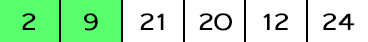
<style>
.page{position:relative;width:368px;height:42px;background:#ffffff}
.page>*{position:absolute;margin:0}
.t1{font:25.2px "Shruti";letter-spacing:-0.08em;color:#000000;text-transform:uppercase;scale:1.34 1}
</style>
<div class="page">
<p class="t1" style="left:22px;top:13px;width:14px;height:17px">2</p>
<p class="t1" style="left:22px;top:13px;width:14px;height:17px">2</p>
<p class="t1" style="left:22px;top:13px;width:14px;height:17px">2</p>
<p class="t1" style="left:84px;top:13px;width:14px;height:18px">9</p>
<p class="t1" style="left:140px;top:13px;width:24px;height:17px">21</p>
<p class="t1" style="left:140px;top:13px;width:24px;height:17px">21</p>
<p class="t1" style="left:140px;top:13px;width:24px;height:17px">21</p>
<p class="t1" style="left:140px;top:13px;width:24px;height:17px">21</p>
<p class="t1" style="left:140px;top:13px;width:24px;height:17px">21</p>
<p class="t1" style="left:199px;top:13px;width:33px;height:18px">20</p>
<p class="t1" style="left:199px;top:13px;width:33px;height:18px">20</p>
<p class="t1" style="left:199px;top:13px;width:33px;height:18px">20</p>
<p class="t1" style="left:263px;top:13px;width:25px;height:17px">12</p>
<p class="t1" style="left:323px;top:13px;width:32px;height:17px">24</p>
<p class="t1" style="left:323px;top:13px;width:32px;height:17px">24</p>
<p class="t1" style="left:323px;top:13px;width:32px;height:17px">24</p>
<p class="t1" style="left:323px;top:13px;width:32px;height:17px">24</p>
<p class="t1" style="left:323px;top:13px;width:32px;height:17px">24</p>
</div>
